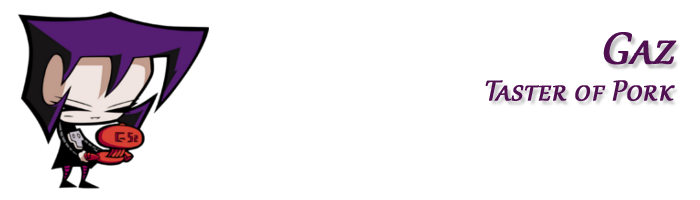
<style>
.page{position:relative;width:700px;height:200px;background:#ffffff}
.page>*{position:absolute;margin:0}
.t1{font:54px "Gabriola";color:#500f51;font-variant:small-caps;font-weight:bold;font-style:italic}
.t2{font:35px "Gabriola";color:#500f51;font-variant:small-caps;font-weight:bold;font-style:italic}
</style>
<div class="page">
<p class="t1" style="left:603px;top:32px;width:74px;height:33px">Gaz</p>
<p class="t2" style="left:485px;top:80px;width:190px;height:21px">Taster of Pork</p>
</div>
